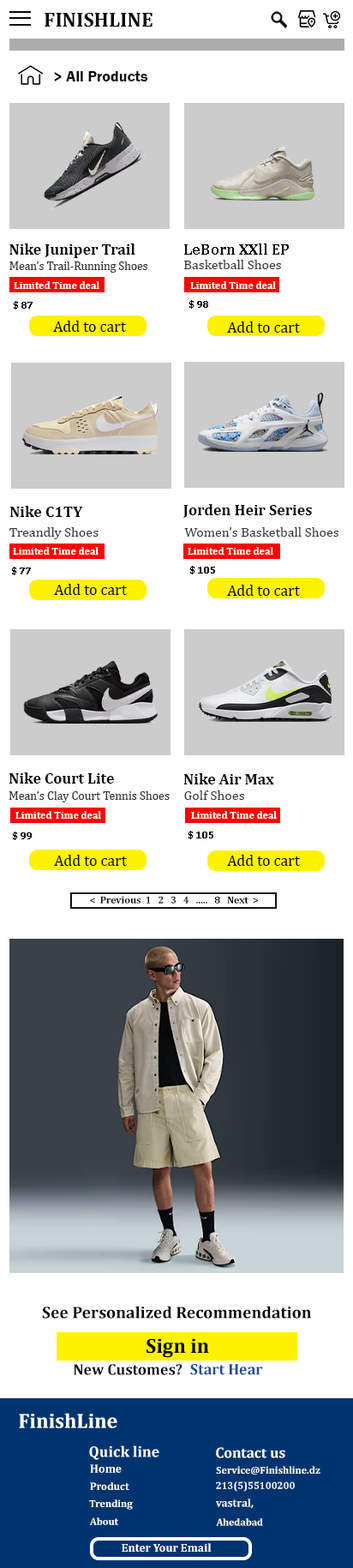
<style>
.page{position:relative;width:353px;height:1568px;background:#ffffff}
.page>*{position:absolute;margin:0}
.t1{font:20.6px "Cambria-Bold";color:#0b0b0b}
.t2{font:15.4px "FranklinGothic-Demi";color:#0b0b0b}
.t3{font:15.4px "Cambria-Bold";color:#050505}
.t4{font:15.4px "Cambria-Bold";color:#090808}
.t5{font:11.7px "Cambria";color:#383838}
.t6{font:13.7px "Cambria";color:#383838}
.t7{font:10.3px "Cambria-Bold";color:#ffffff}
.t8{font:10.3px "Cambria-Bold";color:#050505}
.t9{font:15.4px "Cambria";color:#080808}
.t10{font:15.4px "Cambria-Bold";color:#080808}
.t11{font:13.7px "Cambria";color:#3a3a3a}
.t12{font:12px "Cambria";color:#3a3a3a}
.t13{font:10.1px "Cambria-Bold";color:#080808}
.t14{font:16.7px "Cambria-Bold";color:#080808}
.t15{font:20.6px "Cambria-Bold";color:#080808}
.t16{font:15.4px "Cambria-Bold";color:#090a0a}
.t17{font:15.4px "Cambria-Bold";color:#1e4c93}
.t18{font:20.6px "Cambria-Bold";color:#ffffff}
.t19{font:15.3px "Cambria-Bold";color:#ffffff}
.t20{font:14.7px "Cambria-Bold";color:#ffffff}
.t21{font:11.7px "Cambria-Bold";color:#ffffff}
.t22{font:10.2px "Cambria-Bold";color:#ffffff}
.t23{font:10px "Cambria-Bold";color:#ffffff}
.t24{font:10.7px "Cambria-Bold";color:#ffffff}
.t25{font:11.1px "Cambria-Bold";color:#ffffff}
.t26{font:10.1px "Cambria-Bold";color:#ffffff}
.t27{font:11.6px "Cambria-Bold";color:#ffffff}
</style>
<div class="page">
<p class="t1" style="left:45px;top:13px;width:108px;height:14px">FINISHLINE</p>
<p class="t2" style="left:54px;top:71px;width:94px;height:10px">&gt; All Products</p>
<p class="t3" style="left:9px;top:243px;width:126px;height:15px">Nike Juniper Trail</p>
<p class="t4" style="left:184px;top:243px;width:105px;height:12px">LeBorn XXll EP</p>
<p class="t5" style="left:9px;top:261px;width:138px;height:12px">Mean’s Trail-Running Shoes</p>
<p class="t6" style="left:184px;top:260px;width:97px;height:9px">Basketball Shoes</p>
<p class="t7" style="left:14px;top:281px;width:85px;height:8px">Limited Time deal</p>
<p class="t7" style="left:190px;top:281px;width:86px;height:8px">Limited Time deal</p>
<p class="t8" style="left:14px;top:301px;width:19px;height:8px">$ 87</p>
<p class="t8" style="left:189px;top:300px;width:19px;height:9px">$ 98</p>
<p class="t9" style="left:53px;top:321px;width:73px;height:11px">Add to cart</p>
<p class="t9" style="left:227px;top:321px;width:73px;height:12px">Add to cart</p>
<p class="t10" style="left:10px;top:506px;width:73px;height:11px">Nike C1TY</p>
<p class="t10" style="left:183px;top:504px;width:129px;height:14px">Jorden Heir Series</p>
<p class="t11" style="left:9px;top:527px;width:90px;height:12px">Treandly Shoes</p>
<p class="t11" style="left:184px;top:527px;width:155px;height:10px">Women’s Basketball Shoes</p>
<p class="t7" style="left:13px;top:547px;width:86px;height:8px">Limited Time deal</p>
<p class="t7" style="left:188px;top:547px;width:85px;height:8px">Limited Time deal</p>
<p class="t8" style="left:12px;top:567px;width:19px;height:8px">$ 77</p>
<p class="t8" style="left:190px;top:566px;width:25px;height:8px">$ 105</p>
<p class="t9" style="left:54px;top:584px;width:73px;height:11px">Add to cart</p>
<p class="t9" style="left:227px;top:585px;width:73px;height:11px">Add to cart</p>
<p class="t10" style="left:9px;top:772px;width:105px;height:12px">Nike Court Lite</p>
<p class="t10" style="left:183px;top:773px;width:91px;height:11px">Nike Air Max</p>
<p class="t12" style="left:9px;top:791px;width:161px;height:11px">Mean’s Clay Court Tennis Shoes</p>
<p class="t11" style="left:184px;top:790px;width:60px;height:10px">Golf Shoes</p>
<p class="t7" style="left:15px;top:811px;width:86px;height:8px">Limited Time deal</p>
<p class="t7" style="left:191px;top:811px;width:86px;height:8px">Limited Time deal</p>
<p class="t8" style="left:13px;top:832px;width:19px;height:8px">$ 99</p>
<p class="t8" style="left:189px;top:831px;width:24px;height:8px">$ 105</p>
<p class="t9" style="left:54px;top:855px;width:73px;height:11px">Add to cart</p>
<p class="t9" style="left:227px;top:855px;width:73px;height:11px">Add to cart</p>
<p class="t13" style="left:90px;top:896px;width:168px;height:8px">&lt;  Previous  1   2   3   4   .....   8   Next  &gt;</p>
<p class="t14" style="left:42px;top:1306px;width:269px;height:13px">See Personalized Recommendation</p>
<p class="t15" style="left:147px;top:1338px;width:62px;height:20px">Sign in</p>
<p class="t16" style="left:74px;top:1364px;width:109px;height:11px">New Customes?</p>
<p class="t17" style="left:190px;top:1364px;width:73px;height:11px">Start Hear</p>
<p class="t18" style="left:19px;top:1413px;width:98px;height:15px">FinishLine</p>
<p class="t19" style="left:89px;top:1445px;width:70px;height:15px">Quick line</p>
<p class="t20" style="left:216px;top:1447px;width:69px;height:11px">Contact us</p>
<p class="t21" style="left:90px;top:1464px;width:32px;height:9px">Home</p>
<p class="t22" style="left:216px;top:1466px;width:105px;height:9px">Service@Finishline.dz</p>
<p class="t23" style="left:216px;top:1481px;width:79px;height:11px">213(5)55100200</p>
<p class="t24" style="left:90px;top:1482px;width:39px;height:8px">Product</p>
<p class="t22" style="left:89px;top:1499px;width:44px;height:11px">Trending</p>
<p class="t25" style="left:216px;top:1499px;width:38px;height:10px">vastral,</p>
<p class="t22" style="left:90px;top:1517px;width:28px;height:8px">About</p>
<p class="t26" style="left:216px;top:1518px;width:47px;height:8px">Ahedabad</p>
<p class="t27" style="left:122px;top:1543px;width:90px;height:9px">Enter Your Email</p>
</div>
